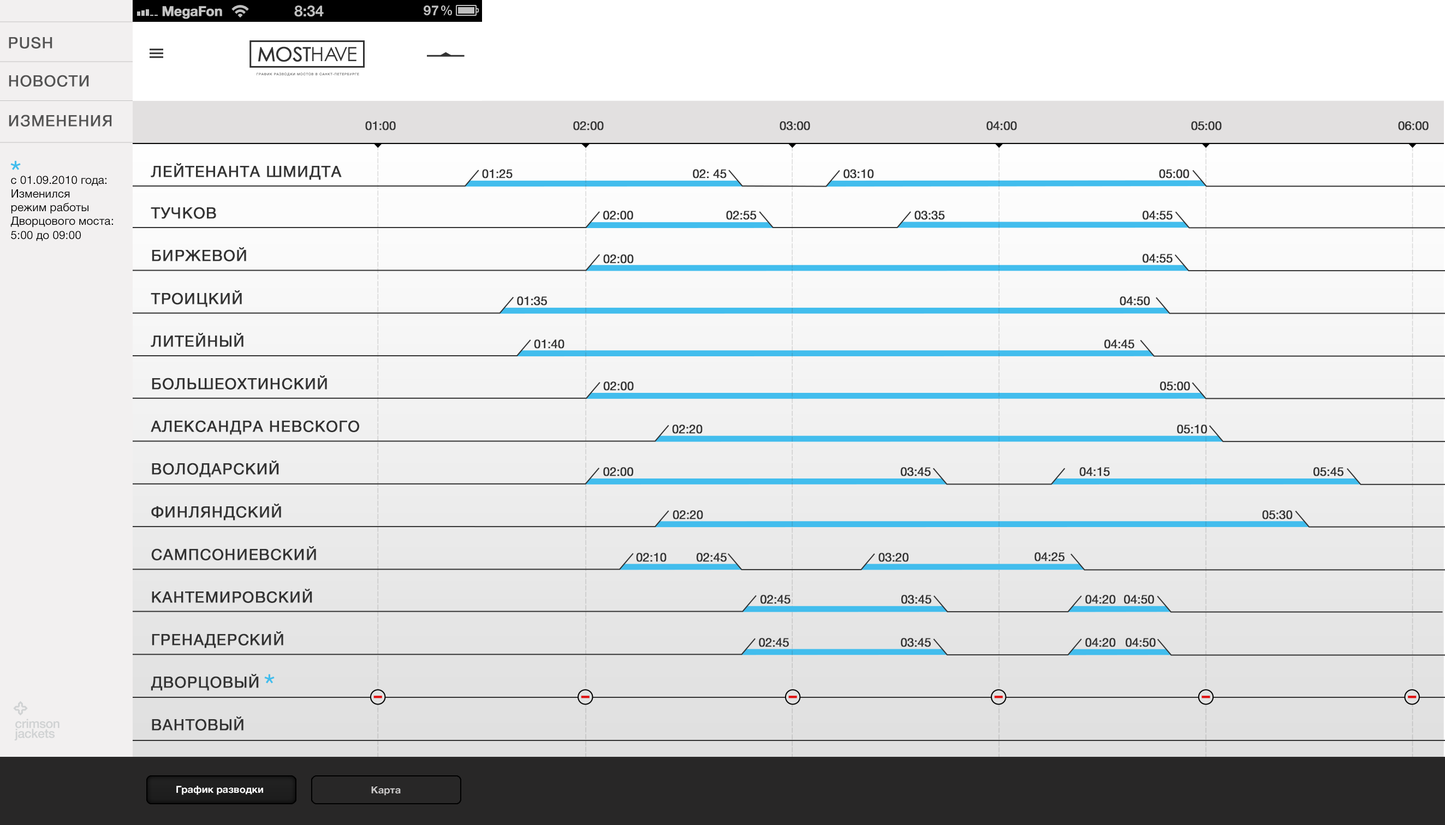
<style>
.page{position:relative;width:1445px;height:825px}
.page>*{position:absolute;margin:0}
.t1{font:15.2px "HelveticaNeue";letter-spacing:0.04em;color:#545454;text-transform:uppercase;font-weight:bold}
.t2{font:12.2px "HelveticaNeue";letter-spacing:-0.02em;color:#333333;text-transform:uppercase;font-weight:bold}
.t3{font:15.2px/42.7px "HelveticaNeue";letter-spacing:0.04em;color:#333333;text-transform:uppercase;font-weight:bold}
.t4{font:15.2px/41.6px "HelveticaNeue";letter-spacing:0.04em;color:#333333;text-transform:uppercase;font-weight:bold}
.t5{font:12.1px "HelveticaNeue";letter-spacing:-0.02em;color:#333333;text-transform:uppercase;font-weight:bold}
.t6{font:11.5px "HelveticaNeueCyr-Roman";color:#000000}
.t7{font:9.8px "HelveticaNeue-Bold";letter-spacing:0.005em;color:#ffffff}
.t8{font:9.8px "HelveticaNeue-Bold";letter-spacing:0.005em;color:#c9c7c7}
</style>
<div class="page">
<p class="t1" style="left:9px;top:37px;width:43px;height:12px">Push</p>
<p class="t1" style="left:9px;top:75px;width:80px;height:12px">новости</p>
<p class="t1" style="left:9px;top:115px;width:103px;height:12px">изменения</p>
<p class="t2" style="left:365px;top:121px;width:31px;height:9px">01:00</p>
<p class="t2" style="left:573px;top:121px;width:31px;height:9px">02:00</p>
<p class="t2" style="left:779px;top:121px;width:31px;height:9px">03:00</p>
<p class="t2" style="left:986px;top:121px;width:31px;height:9px">04:00</p>
<p class="t2" style="left:1191px;top:121px;width:31px;height:9px">05:00</p>
<p class="t2" style="left:1398px;top:121px;width:30px;height:9px">06:00</p>
<p class="t3" style="left:151px;top:163px;width:208px;height:568px">Лейтенанта Шмидта<br><span class="t4">Тучков  <br></span>Биржевой<br>Троицкий<br>Литейный <br>Большеохтинский<br>Александра Невского<br>Володарский<br>Финляндский<br>Сампсониевский<br>Кантемировский<br>Гренадерский<br>Дворцовый<br>вантовый</p>
<p class="t5" style="left:482px;top:169px;width:31px;height:9px">01:25</p>
<p class="t5" style="left:693px;top:169px;width:34px;height:9px">02: 45</p>
<p class="t5" style="left:843px;top:169px;width:31px;height:9px">03:10</p>
<p class="t5" style="left:1159px;top:169px;width:30px;height:9px">05:00</p>
<p class="t6" style="left:10px;top:176px;width:103px;height:65px">с 01.09.2010 года: <br>Изменился<br>режим работы<br>Дворцового моста: <br>5:00 до 09:00</p>
<p class="t5" style="left:603px;top:211px;width:30px;height:9px">02:00</p>
<p class="t5" style="left:726px;top:211px;width:31px;height:9px">02:55</p>
<p class="t5" style="left:914px;top:211px;width:31px;height:9px">03:35</p>
<p class="t5" style="left:1142px;top:211px;width:30px;height:9px">04:55</p>
<p class="t5" style="left:603px;top:254px;width:31px;height:10px">02:00</p>
<p class="t5" style="left:1142px;top:254px;width:30px;height:9px">04:55</p>
<p class="t5" style="left:517px;top:296px;width:30px;height:10px">01:35</p>
<p class="t5" style="left:1120px;top:296px;width:30px;height:10px">04:50</p>
<p class="t5" style="left:534px;top:340px;width:30px;height:9px">01:40</p>
<p class="t5" style="left:1104px;top:340px;width:30px;height:9px">04:45</p>
<p class="t5" style="left:603px;top:382px;width:31px;height:9px">02:00</p>
<p class="t5" style="left:1160px;top:382px;width:30px;height:9px">05:00</p>
<p class="t5" style="left:672px;top:425px;width:30px;height:9px">02:20</p>
<p class="t5" style="left:1177px;top:425px;width:30px;height:9px">05:10</p>
<p class="t5" style="left:603px;top:467px;width:30px;height:10px">02:00</p>
<p class="t5" style="left:901px;top:467px;width:30px;height:10px">03:45</p>
<p class="t5" style="left:1079px;top:467px;width:31px;height:10px">04:15</p>
<p class="t5" style="left:1313px;top:467px;width:30px;height:10px">05:45</p>
<p class="t5" style="left:672px;top:510px;width:31px;height:10px">02:20</p>
<p class="t5" style="left:1262px;top:510px;width:31px;height:10px">05:30</p>
<p class="t5" style="left:636px;top:553px;width:30px;height:9px">02:10</p>
<p class="t5" style="left:696px;top:553px;width:31px;height:9px">02:45</p>
<p class="t5" style="left:878px;top:553px;width:31px;height:9px">03:20</p>
<p class="t5" style="left:1034px;top:552px;width:30px;height:10px">04:25</p>
<p class="t5" style="left:760px;top:595px;width:30px;height:9px">02:45</p>
<p class="t5" style="left:901px;top:595px;width:30px;height:9px">03:45</p>
<p class="t5" style="left:1085px;top:595px;width:31px;height:9px">04:20</p>
<p class="t5" style="left:1124px;top:595px;width:30px;height:9px">04:50</p>
<p class="t5" style="left:759px;top:638px;width:30px;height:9px">02:45</p>
<p class="t5" style="left:901px;top:638px;width:30px;height:9px">03:45</p>
<p class="t5" style="left:1085px;top:638px;width:31px;height:9px">04:20</p>
<p class="t5" style="left:1126px;top:638px;width:30px;height:9px">04:50</p>
<p class="t7" style="left:176px;top:786px;width:87px;height:9px">График разводки</p>
<p class="t8" style="left:371px;top:787px;width:30px;height:9px">Карта</p>
</div>
